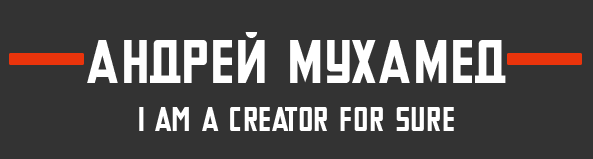
<style>
.page{position:relative;width:593px;height:159px;background:#333333}
.page>*{position:absolute;margin:0}
.t1{font:62.2px "Tschichold-Bold";color:#ffffff;text-transform:uppercase}
.t2{font:33.2px "Tschichold-Bold";color:#ffffff;text-transform:uppercase}
</style>
<div class="page">
<p class="t1" style="left:87px;top:32px;width:419px;height:51px">Андрей мухамед</p>
<p class="t2" style="left:139px;top:107px;width:315px;height:24px">I am a creator for sure</p>
</div>
